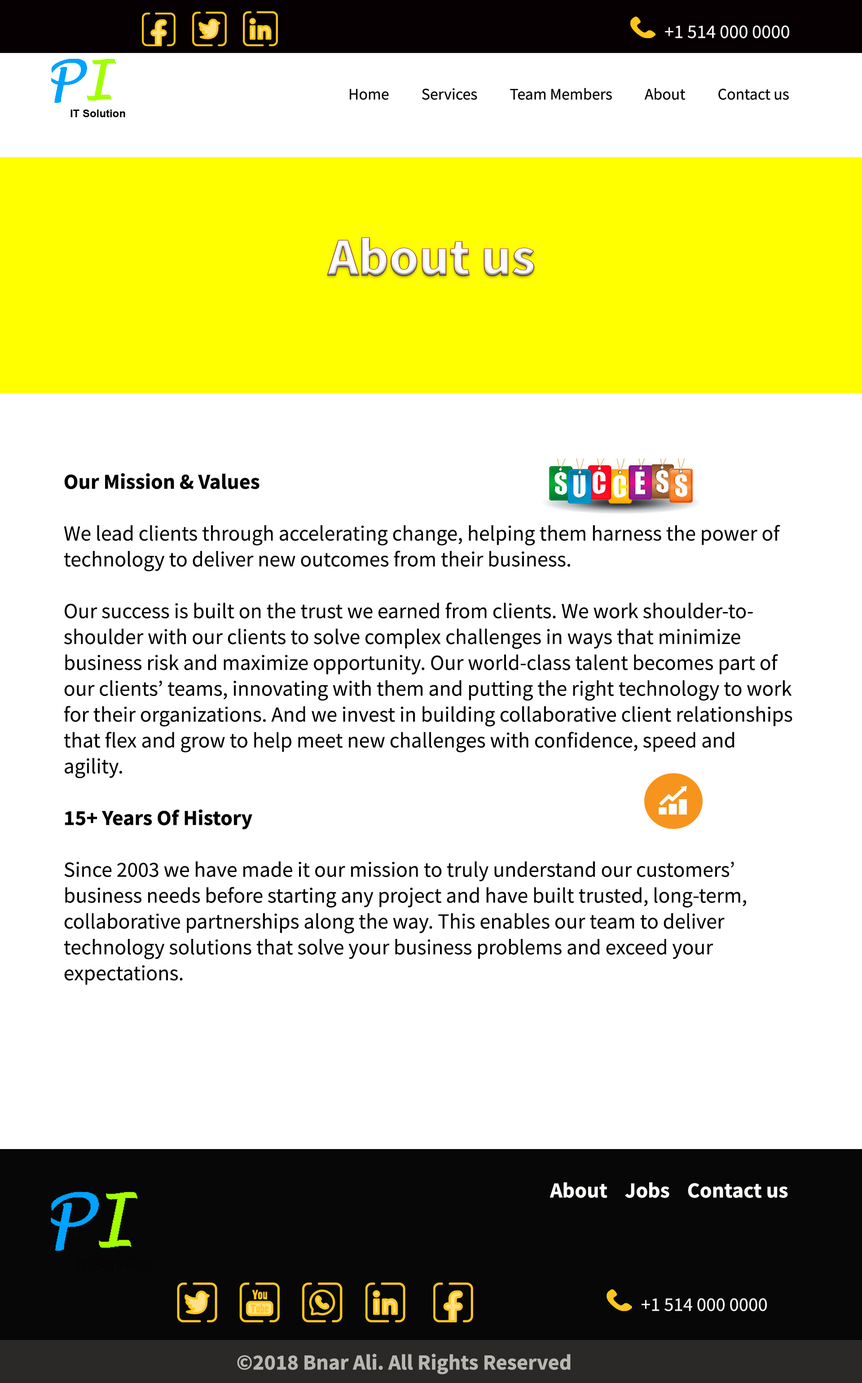
<style>
.page{position:relative;width:862px;height:1383px;background:#ffffff}
.page>*{position:absolute;margin:0}
.t1{font:53.9px "SourceSansRoman-Bold";color:#fefcfd}
.t2{font:21.6px "SourceSansRoman-Regular";color:#040404}
.t3{font:21.6px "SourceSansRoman-Bold";color:#040404}
</style>
<div class="page">
<p class="t1" style="left:327px;top:238px;width:207px;height:38px">About us</p>
<p class="t2" style="left:64px;top:473px;width:729px;height:512px"><span class="t3">Our Mission &amp; Values<br></span><br>We lead clients through accelerating change, helping them harness the power of technology to deliver new outcomes from their business. <br><br>Our success is built on the trust we earned from clients. We work shoulder-to- shoulder with our clients to solve complex challenges in ways that minimize business risk and maximize opportunity. Our world-class talent becomes part of our clients’ teams, innovating with them and putting the right technology to work for their organizations. And we invest in building collaborative client relationships that flex and grow to help meet new challenges with confidence, speed and agility.<br><br><span class="t3">15+ Years Of History<br><br></span>Since 2003 we have made it our mission to truly understand our customers’ business needs before starting any project and have built trusted, long-term, collaborative partnerships along the way. This enables our team to deliver technology solutions that solve your business problems and exceed your expectations.</p>
</div>
